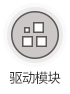
<style>
.page{position:relative;width:70px;height:94px;background:#ffffff}
.page>*{position:absolute;margin:0}
.t1{font:13px "MicrosoftYaHei";color:#323232}
</style>
<div class="page">
<p class="t1" style="left:9px;top:71px;width:52px;height:13px">驱动模块</p>
</div>
